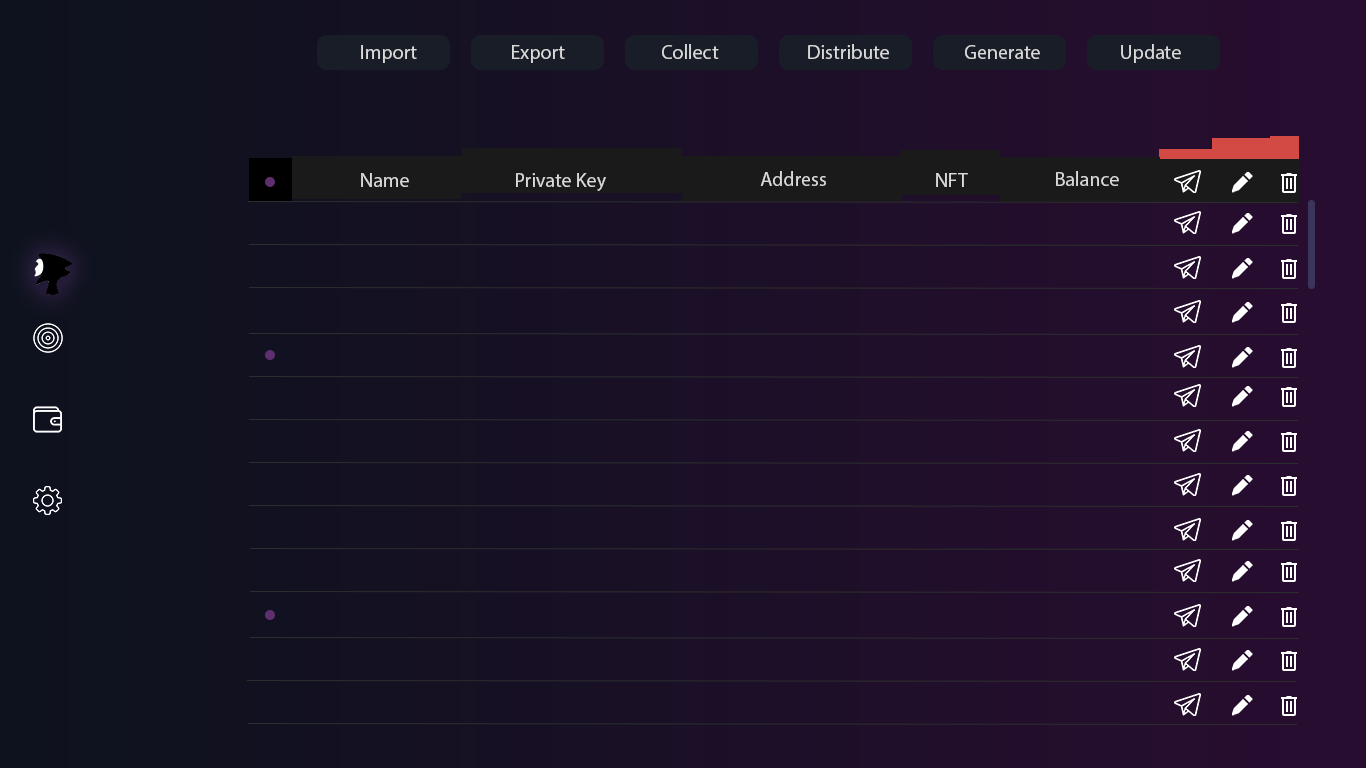
<style>
.page{position:relative;width:1366px;height:768px}
.page>*{position:absolute;margin:0}
.t1{font:20px "MyriadPro-Regular";color:#dadada}
</style>
<div class="page">
<p class="t1" style="left:361px;top:45px;width:56px;height:18px">Import</p>
<p class="t1" style="left:512px;top:45px;width:53px;height:18px">Export</p>
<p class="t1" style="left:662px;top:44px;width:57px;height:15px">Collect</p>
<p class="t1" style="left:808px;top:44px;width:81px;height:15px">Distribute</p>
<p class="t1" style="left:965px;top:45px;width:75px;height:14px">Generate</p>
<p class="t1" style="left:1121px;top:44px;width:60px;height:19px">Update</p>
<p class="t1" style="left:361px;top:173px;width:48px;height:14px">Name</p>
<p class="t1" style="left:516px;top:173px;width:90px;height:18px">Private Key</p>
<p class="t1" style="left:760px;top:171px;width:66px;height:15px">Address</p>
<p class="t1" style="left:936px;top:173px;width:32px;height:14px">NFT</p>
<p class="t1" style="left:1056px;top:171px;width:63px;height:15px">Balance</p>
</div>
